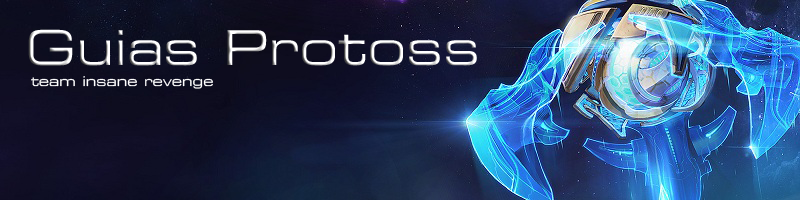
<style>
.page{position:relative;width:800px;height:200px}
.page>*{position:absolute;margin:0}
.t1{font:48px "ESL-eSport-Ext-Light"}
.t2{font:13.3px "ESL-eSport-Ext-Light";color:#ffffff}
</style>
<div class="page">
<p class="t1" style="left:28px;top:29px;width:449px;height:37px">Guias Protoss</p>
<p class="t2" style="left:31px;top:76px;width:182px;height:13px">team insane revenge</p>
</div>
